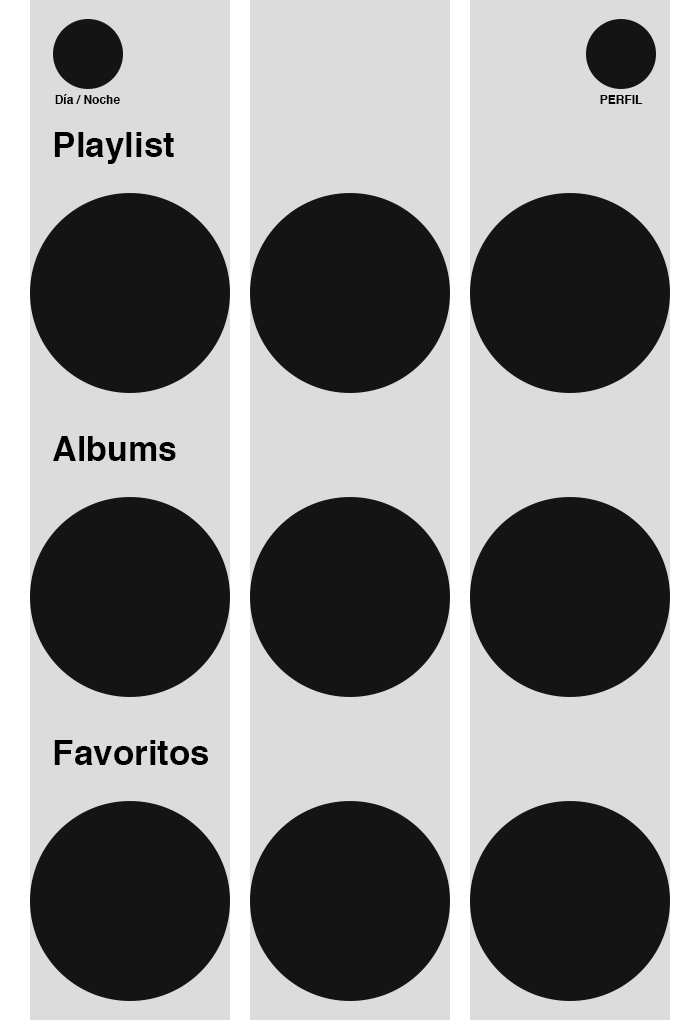
<style>
.page{position:relative;width:700px;height:1020px;background:#dcdcdc}
.page>*{position:absolute;margin:0}
.t1{font:12px "Helvetica-Bold";color:#000000}
.t2{font:35px "Helvetica-Bold";color:#000000}
.t3{font:34px "Helvetica-Bold";color:#000000}
</style>
<div class="page">
<p class="t1" style="left:55px;top:94px;width:65px;height:10px">Día / Noche</p>
<p class="t1" style="left:600px;top:95px;width:43px;height:9px">PERFIL</p>
<p class="t2" style="left:54px;top:132px;width:120px;height:32px">Playlist</p>
<p class="t3" style="left:53px;top:436px;width:123px;height:25px">Albums</p>
<p class="t2" style="left:54px;top:740px;width:154px;height:25px">Favoritos</p>
</div>
